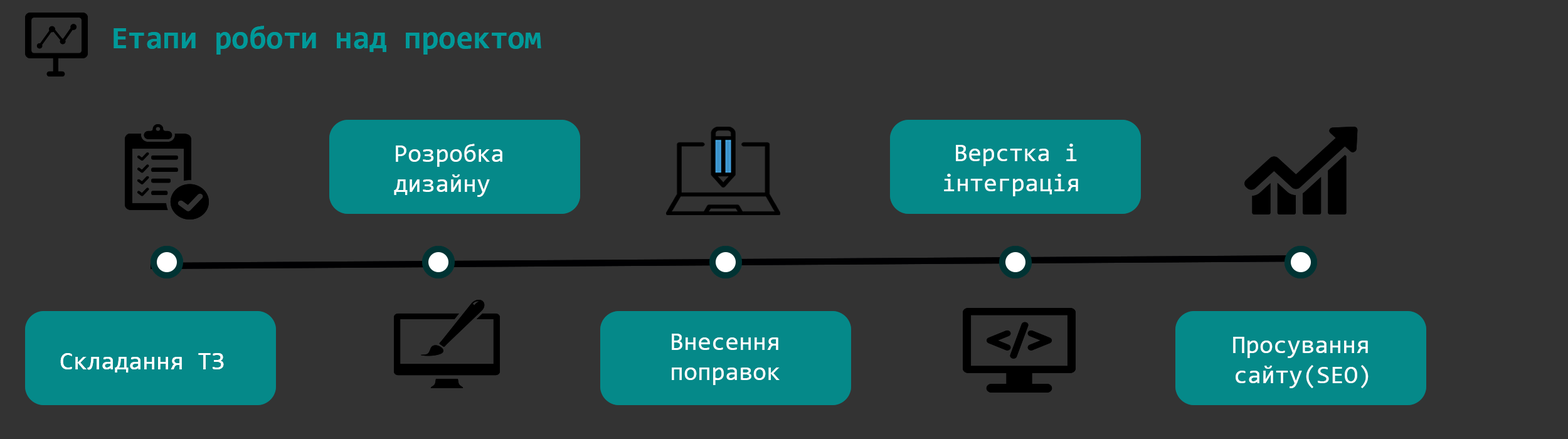
<style>
.page{position:relative;width:1568px;height:439px;background:#333333}
.page>*{position:absolute;margin:0}
.t1{font:31.4px "Consolas-Bold";color:#009999}
.t2{font:25.1px "Consolas";color:#ffffff}
.t3{font:31.4px "MinionPro-BoldCn";color:#ffffff}
</style>
<div class="page">
<p class="t1" style="left:114px;top:26px;width:427px;height:29px">Етапи роботи над проектом</p>
<p class="t2" style="left:394px;top:144px;width:108px;height:53px">Розробка <br>дизайну</p>
<p class="t2" style="left:944px;top:144px;width:134px;height:52px"><span class="t3">  </span>Верстка і<br>інтеграція</p>
<p class="t2" style="left:672px;top:334px;width:108px;height:51px">Внесення <br>поправок</p>
<p class="t2" style="left:1233px;top:337px;width:136px;height:51px"><span class="t3">  </span>Просування <br> сайту(SEO)</p>
<p class="t2" style="left:60px;top:353px;width:164px;height:20px">Складання ТЗ</p>
</div>
